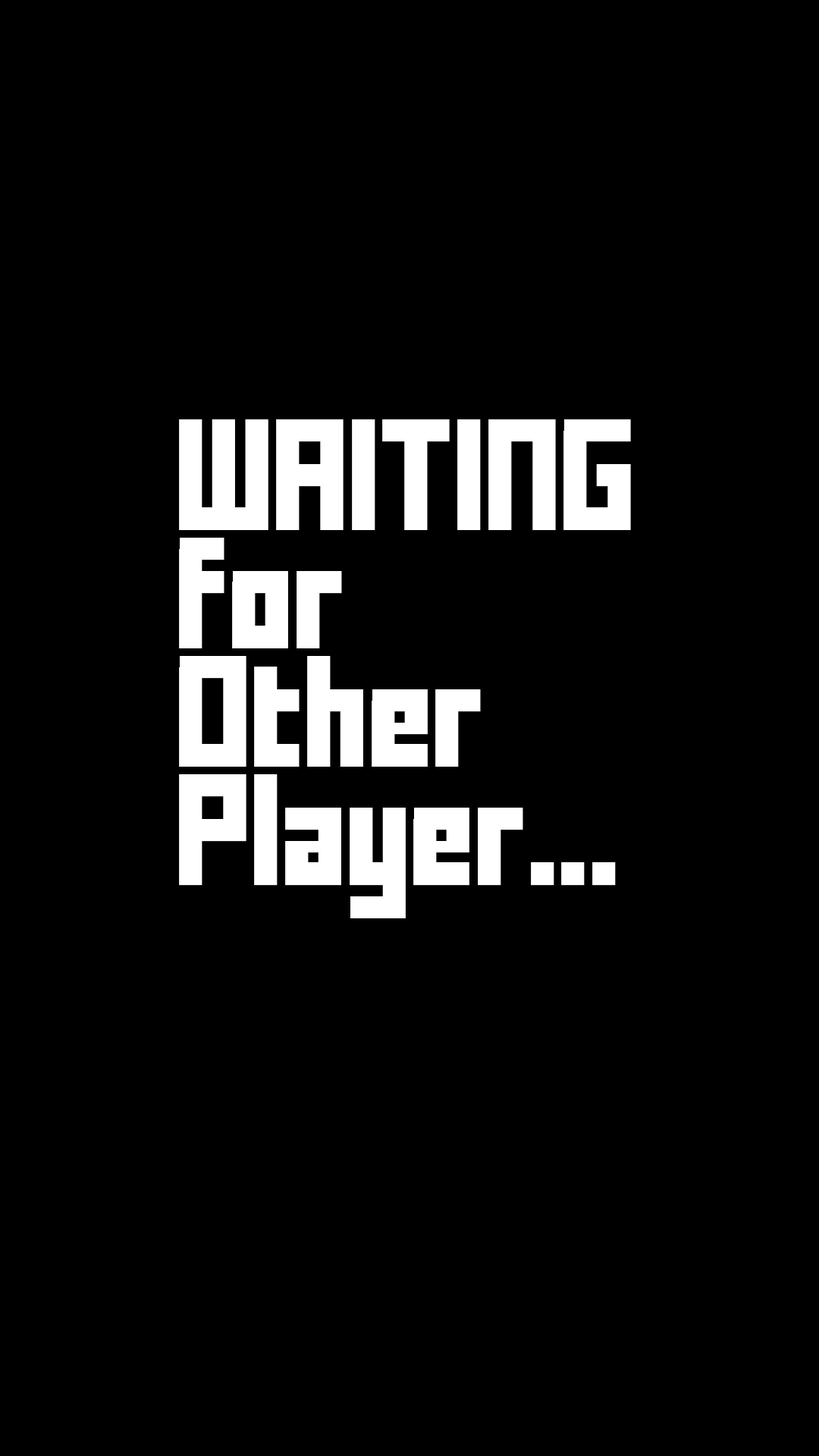
<style>
.page{position:relative;width:819px;height:1456px;background:#000000}
.page>*{position:absolute;margin:0}
.t1{font:151.7px/59.1px "FFFForward";letter-spacing:-0.025em;color:#ffffff}
</style>
<div class="page">
<p class="t1" style="left:179px;top:419px;width:452px;height:499px">WAITING<br><br>for<br><br>Other<br><br>Player...</p>
</div>
